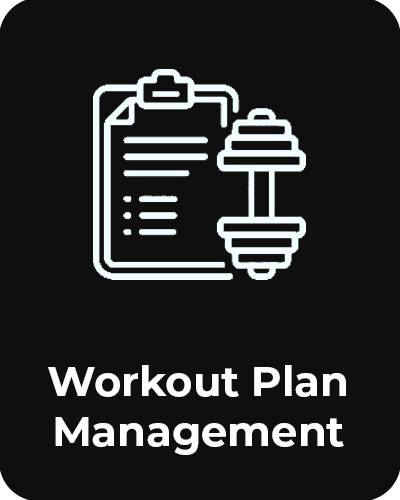
<style>
.page{position:relative;width:400px;height:500px;background:#0f0f0f}
.page>*{position:absolute;margin:0}
.t1{font:41.7px "Montserrat-Bold";color:#ffffff}
</style>
<div class="page">
<p class="t1" style="left:48px;top:365px;width:298px;height:90px;text-align:center">Workout Plan<br>Management</p>
</div>
